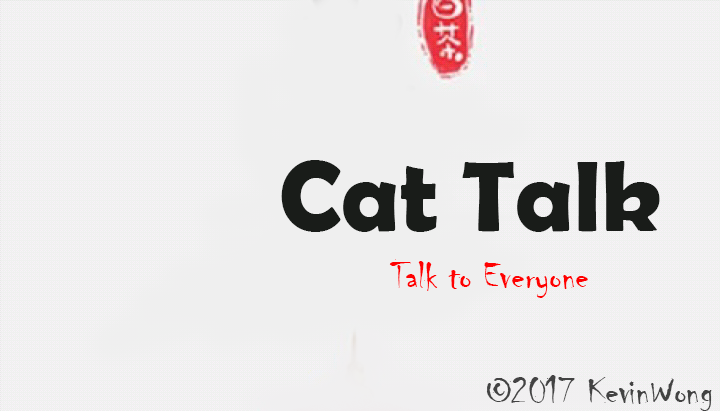
<style>
.page{position:relative;width:720px;height:411px;background:#efefef}
.page>*{position:absolute;margin:0}
.t1{font:100px "BerlinSansFBDemi-Bold";color:#191c19}
.t2{font:40px "Chiller-Regular";color:#ff0000}
.t3{font:40px "Chiller-Regular";color:#434343}
</style>
<div class="page">
<p class="t1" style="left:281px;top:160px;width:379px;height:72px">Cat Talk</p>
<p class="t2" style="left:389px;top:259px;width:199px;height:39px">Talk to Everyone</p>
<p class="t3" style="left:486px;top:375px;width:226px;height:36px">©2017 KevinWong</p>
</div>
